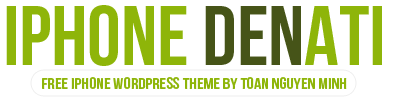
<style>
.page{position:relative;width:400px;height:100px;background:#ffffff}
.page>*{position:absolute;margin:0}
.t1{font:85px "BebasNeue";color:#8eb509}
.t2{font:85px "BebasNeue";color:#465418}
.t3{font:16px "BebasNeue";color:#8eb509;scale:1.13 1}
</style>
<div class="page">
<p class="t1" style="left:6px;top:5px;width:376px;height:61px">iphone <span class="t2">Den</span>ati</p>
<p class="t3" style="left:42px;top:77px;width:305px;height:12px">Free Iphone Wordpress Theme By Toan Nguyen Minh</p>
</div>
